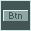
<style>
.page{position:relative;width:31px;height:31px;background:#435655}
.page>*{position:absolute;margin:0}
.t1{font:9px "Tahoma";color:#435655}
</style>
<div class="page">
<p class="t1" style="left:9px;top:12px;width:13px;height:7px">Btn</p>
</div>
